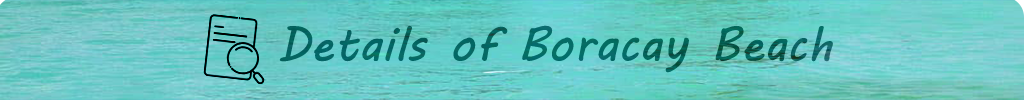
<style>
.page{position:relative;width:1024px;height:100px}
.page>*{position:absolute;margin:0}
.t1{font:48px "MVBoli";color:#056762}
</style>
<div class="page">
<p class="t1" style="left:279px;top:25px;width:554px;height:48px">Details of Boracay Beach</p>
</div>
